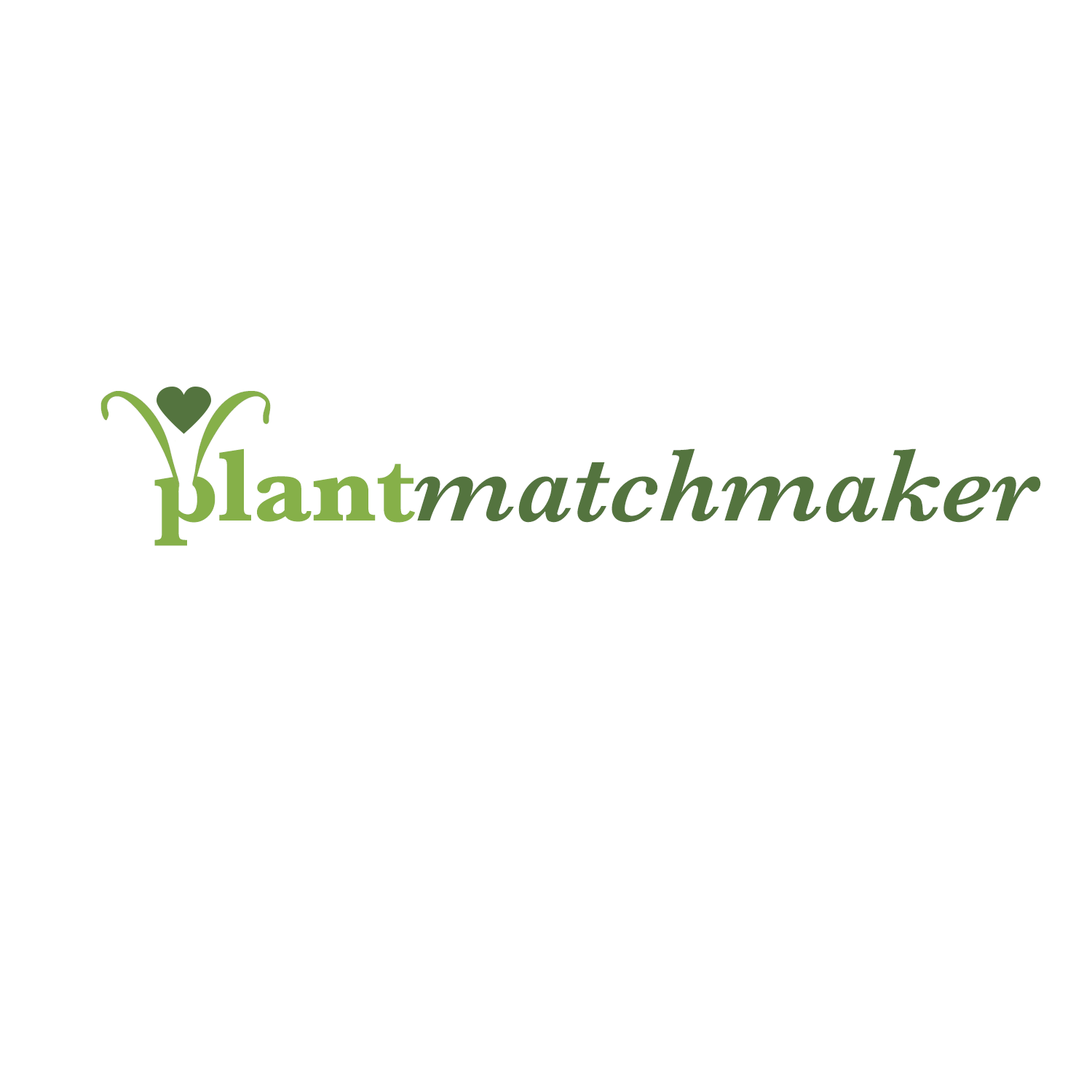
<style>
.page{position:relative;width:1092px;height:1092px;background:#ffffff}
.page>*{position:absolute;margin:0}
.t1{font:106.2px "Baskerville-SemiBoldItalic";letter-spacing:0.01em;color:#54743f}
.t2{font:106.2px "Baskerville-Bold";color:#86b049}
</style>
<div class="page">
<p class="t1" style="left:154px;top:448px;width:887px;height:98px"><span class="t2">plant</span>matchmaker</p>
</div>
